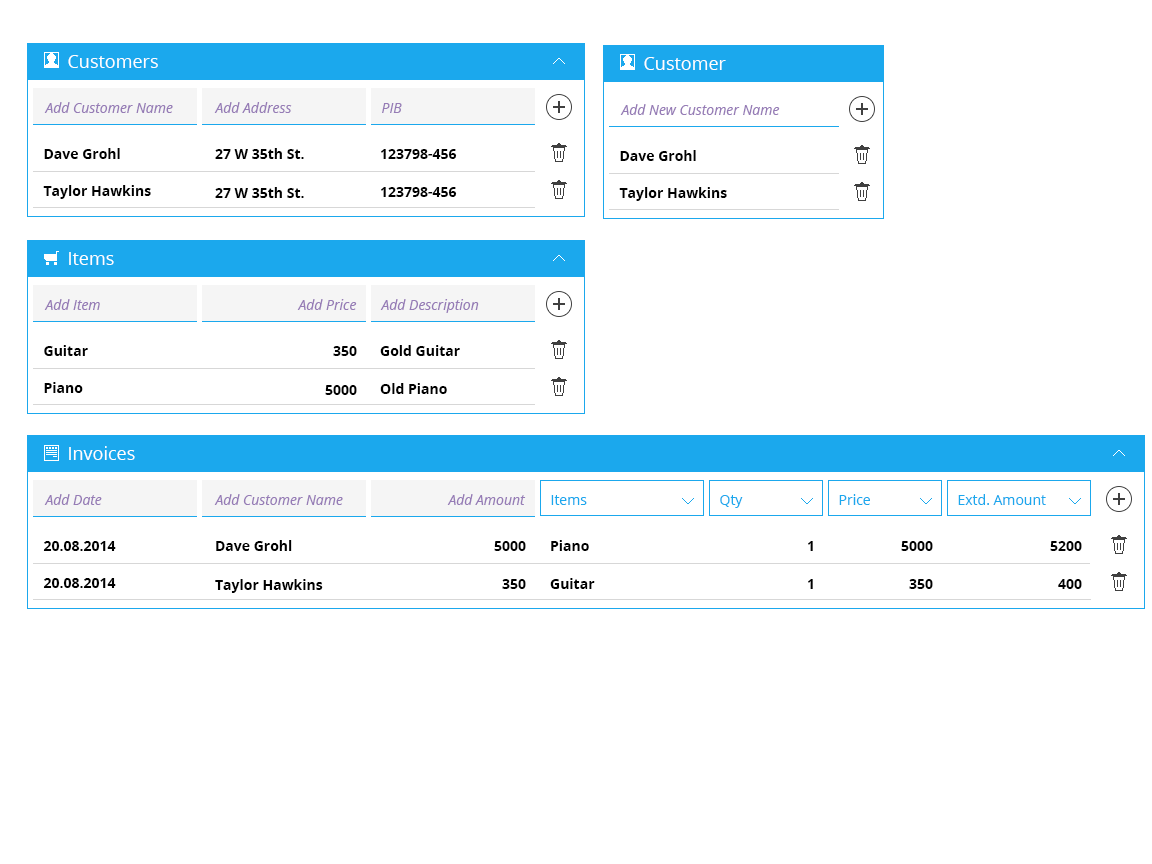
<style>
.page{position:relative;width:1152px;height:864px;background:#ffffff}
.page>*{position:absolute;margin:0}
.t1{font:18px "OpenSans";color:#ffffff}
.t2{font:14px "OpenSans-Italic";color:#967cb6}
.t3{font:14px "OpenSans-Bold";color:#000000}
.t4{font:14px "OpenSans";color:#1ba8ed}
</style>
<div class="page">
<p class="t1" style="left:68px;top:55px;width:90px;height:13px">Customers</p>
<p class="t1" style="left:644px;top:57px;width:82px;height:13px">Customer</p>
<p class="t2" style="left:44px;top:102px;width:129px;height:11px">Add Customer Name</p>
<p class="t2" style="left:214px;top:102px;width:78px;height:11px">Add Address</p>
<p class="t2" style="left:382px;top:103px;width:20px;height:10px">PIB</p>
<p class="t2" style="left:620px;top:104px;width:160px;height:11px">Add New Customer Name</p>
<p class="t3" style="left:44px;top:148px;width:76px;height:11px">Dave Grohl</p>
<p class="t3" style="left:215px;top:148px;width:89px;height:11px">27 W 35th St.</p>
<p class="t3" style="left:381px;top:149px;width:76px;height:10px">123798-456</p>
<p class="t3" style="left:620px;top:150px;width:76px;height:11px">Dave Grohl</p>
<p class="t3" style="left:43px;top:185px;width:108px;height:14px">Taylor Hawkins</p>
<p class="t3" style="left:215px;top:187px;width:89px;height:11px">27 W 35th St.</p>
<p class="t3" style="left:381px;top:187px;width:76px;height:10px">123798-456</p>
<p class="t3" style="left:619px;top:187px;width:108px;height:14px">Taylor Hawkins</p>
<p class="t1" style="left:69px;top:252px;width:45px;height:13px">Items</p>
<p class="t2" style="left:44px;top:299px;width:56px;height:11px">Add Item</p>
<p class="t2" style="left:297px;top:299px;width:60px;height:11px">Add Price</p>
<p class="t2" style="left:380px;top:299px;width:99px;height:14px">Add Description</p>
<p class="t3" style="left:44px;top:345px;width:44px;height:11px">Guitar</p>
<p class="t3" style="left:333px;top:346px;width:24px;height:10px">350</p>
<p class="t3" style="left:380px;top:345px;width:80px;height:11px">Gold Guitar</p>
<p class="t3" style="left:44px;top:382px;width:39px;height:11px">Piano</p>
<p class="t3" style="left:325px;top:385px;width:32px;height:10px">5000</p>
<p class="t3" style="left:380px;top:383px;width:67px;height:11px">Old Piano</p>
<p class="t1" style="left:69px;top:446px;width:66px;height:14px">Invoices</p>
<p class="t2" style="left:44px;top:494px;width:58px;height:11px">Add Date</p>
<p class="t2" style="left:214px;top:494px;width:129px;height:11px">Add Customer Name</p>
<p class="t2" style="left:447px;top:494px;width:79px;height:11px">Add Amount</p>
<p class="t4" style="left:551px;top:495px;width:36px;height:10px">Items</p>
<p class="t4" style="left:720px;top:495px;width:23px;height:13px">Qty</p>
<p class="t4" style="left:839px;top:494px;width:31px;height:11px">Price</p>
<p class="t4" style="left:958px;top:494px;width:88px;height:11px">Extd. Amount</p>
<p class="t3" style="left:43px;top:541px;width:73px;height:10px">20.08.2014</p>
<p class="t3" style="left:216px;top:540px;width:76px;height:11px">Dave Grohl</p>
<p class="t3" style="left:494px;top:541px;width:32px;height:10px">5000</p>
<p class="t3" style="left:551px;top:540px;width:38px;height:11px">Piano</p>
<p class="t3" style="left:808px;top:541px;width:5px;height:10px">1</p>
<p class="t3" style="left:901px;top:541px;width:32px;height:10px">5000</p>
<p class="t3" style="left:1050px;top:541px;width:32px;height:10px">5200</p>
<p class="t3" style="left:43px;top:578px;width:73px;height:10px">20.08.2014</p>
<p class="t3" style="left:215px;top:579px;width:108px;height:14px">Taylor Hawkins</p>
<p class="t3" style="left:502px;top:579px;width:24px;height:10px">350</p>
<p class="t3" style="left:550px;top:578px;width:45px;height:11px">Guitar</p>
<p class="t3" style="left:808px;top:579px;width:5px;height:10px">1</p>
<p class="t3" style="left:909px;top:579px;width:24px;height:10px">350</p>
<p class="t3" style="left:1058px;top:579px;width:24px;height:10px">400</p>
</div>
